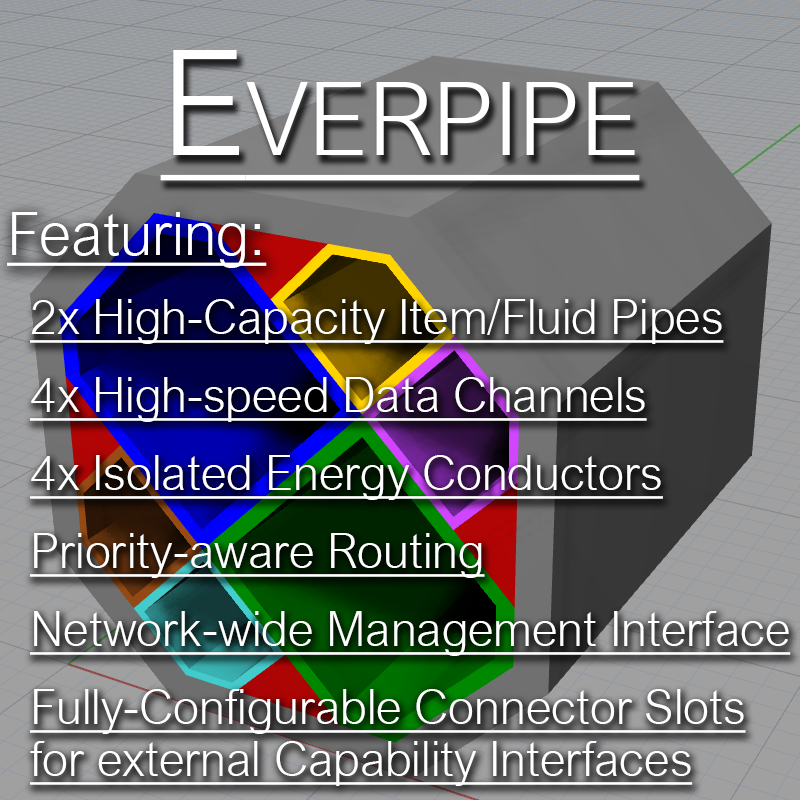
<style>
.page{position:relative;width:800px;height:800px}
.page>*{position:absolute;margin:0}
.t1{font:146px "ArialNova-Light";color:#ffffff;font-variant:small-caps;text-decoration:underline}
.t2{font:60px "ArialNova-Light";color:#ffffff;text-decoration:underline}
.t3{font:48px/26px "ArialNova-Light";color:#ffffff;text-decoration:underline}
</style>
<div class="page">
<p class="t1" style="left:160px;top:50px;width:480px;height:131px">Everpipe</p>
<p class="t2" style="left:7px;top:212px;width:260px;height:56px">Featuring:</p>
<p class="t3" style="left:30px;top:299px;width:761px;height:487px">2x High-Capacity Item/Fluid Pipes<br><br><br>4x High-speed Data Channels<br><br><br>4x Isolated Energy Conductors<br><br><br>Priority-aware Routing<br><br><br>Network-wide Management Interface<br><br><br>Fully-Configurable Connector Slots<br><br>for external Capability Interfaces</p>
</div>
